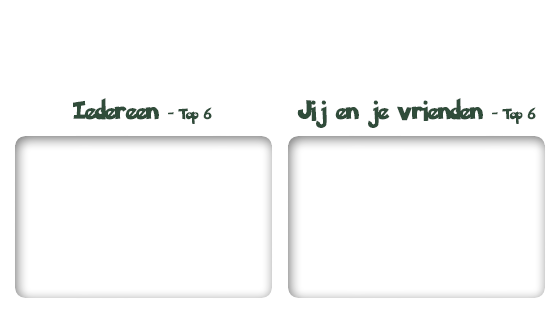
<style>
.page{position:relative;width:560px;height:314px;background:#ffffff}
.page>*{position:absolute;margin:0}
.t1{font:20px "PokemonSolidNormal";color:#304c3a}
.t2{font:12px "PokemonSolidNormal";color:#304c3a}
</style>
<div class="page">
<p class="t1" style="left:73px;top:98px;width:463px;height:30px">Iedereen <span class="t2">- Top 6</span>         Jij en je vrienden <span class="t2">- Top 6</span></p>
</div>
